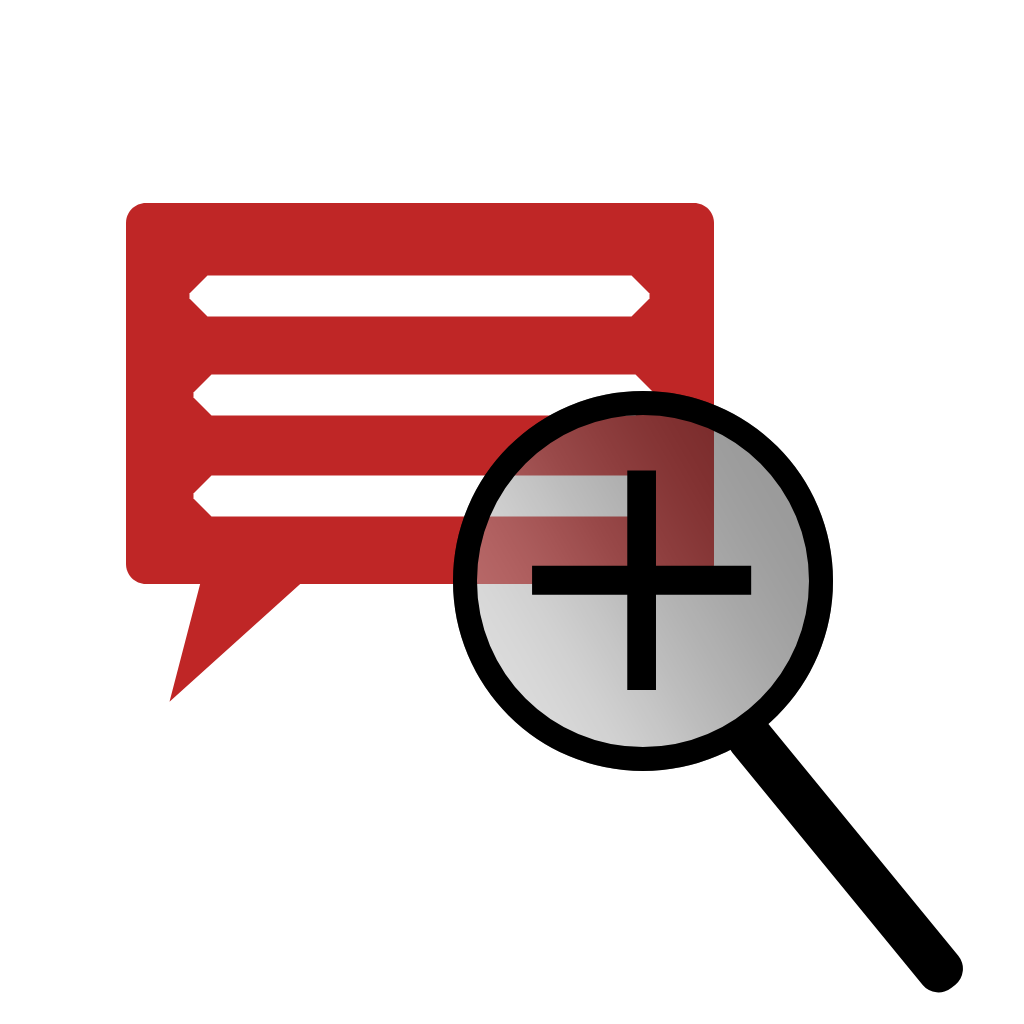
<style>
.page{position:relative;width:1024px;height:1024px;background:#ffffff}
.page>*{position:absolute;margin:0}
.t1{font:350px "DejaVuSans";color:#000000}
</style>
<div class="page">
<p class="t1" style="left:532px;top:470px;width:220px;height:220px">+</p>
</div>
